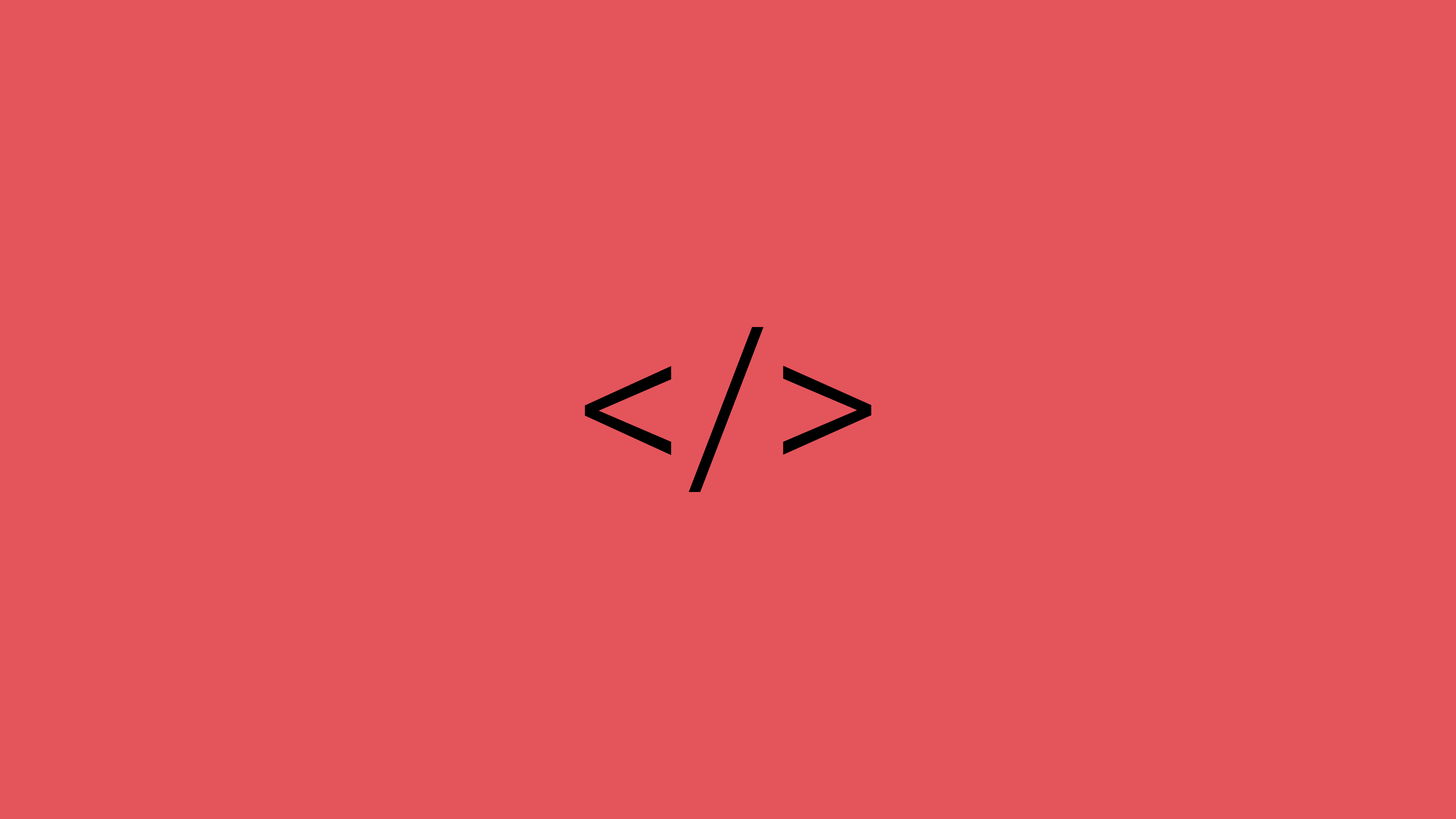
<style>
.page{position:relative;width:1456px;height:819px;background:#e4545b}
.page>*{position:absolute;margin:0}
.t1{font:213.3px "Roboto-Light";color:#000000}
</style>
<div class="page">
<p class="t1" style="left:585px;top:327px;width:286px;height:165px">&lt;/&gt;</p>
</div>
